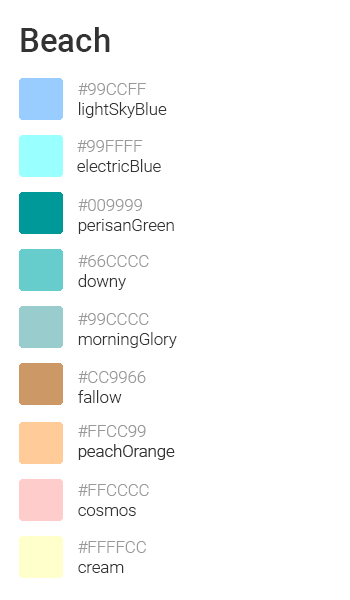
<style>
.page{position:relative;width:350px;height:600px;background:#ffffff}
.page>*{position:absolute;margin:0}
.t1{font:33.3px "Roboto-Medium";color:#333333}
.t2{font:16.7px "Roboto-Light";color:#333333}
.t3{font:16.7px "Roboto-Light";color:#999999}
</style>
<div class="page">
<p class="t1" style="left:21px;top:27px;width:89px;height:25px">Beach</p>
<p class="t2" style="left:78px;top:83px;width:89px;height:35px"><span class="t3">#99CCFF<br></span>lightSkyBlue</p>
<p class="t2" style="left:77px;top:140px;width:84px;height:32px"><span class="t3">#99FFFF<br></span>electricBlue</p>
<p class="t2" style="left:78px;top:199px;width:96px;height:35px"><span class="t3">#009999<br></span>perisanGreen</p>
<p class="t3" style="left:78px;top:255px;width:71px;height:35px">#66CCCC<br><span class="t2">downy</span></p>
<p class="t2" style="left:78px;top:313px;width:99px;height:35px"><span class="t3">#99CCCC<br></span>morningGlory</p>
<p class="t3" style="left:78px;top:371px;width:68px;height:32px">#CC9966<br><span class="t2">fallow</span></p>
<p class="t3" style="left:78px;top:484px;width:71px;height:32px">#FFCCCC<br><span class="t2">cosmos</span></p>
<p class="t3" style="left:78px;top:541px;width:68px;height:32px">#FFFFCC<br><span class="t2">cream</span></p>
</div>
